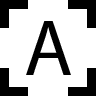
<style>
.page{position:relative;width:96px;height:96px;background:#ffffff}
.page>*{position:absolute;margin:0}
.t1{font:80px "MyriadPro-Regular";color:#000000}
</style>
<div class="page">
<p class="t1" style="left:26px;top:21px;width:45px;height:54px">A</p>
</div>
